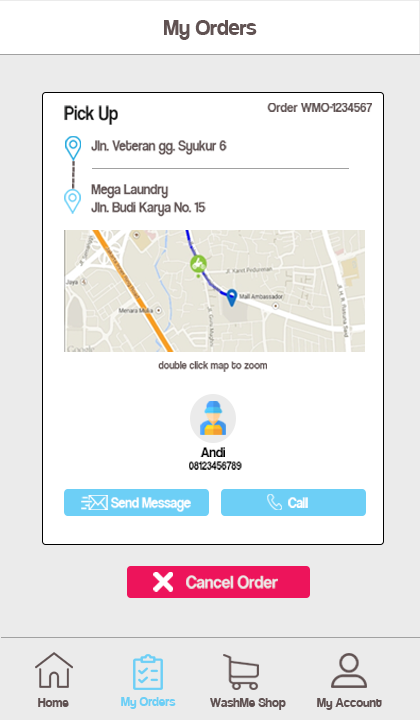
<style>
.page{position:relative;width:420px;height:720px;background:#ffffff}
.page>*{position:absolute;margin:0}
.t1{font:24px "Coolvetica-Regular";color:#605252}
.t2{font:20.3px "CoolveticaRg-Regular";color:#121313;scale:0.88 1}
.t3{font:13.5px "CoolveticaRg-Regular";color:#605252;scale:0.96 1}
.t4{font:15.2px "CoolveticaRg-Regular";color:#605252;scale:0.88 1}
.t5{font:17.8px "CoolveticaRg-Regular";color:#605252;scale:1.14 1}
.t6{font:11.8px "CoolveticaRg-Regular";color:#605252;scale:0.88 1}
.t7{font:15.2px "CoolveticaRg-Regular";color:#000000;scale:0.88 1}
.t8{font:11.8px "CoolveticaRg-Regular";color:#040404;scale:0.88 1}
.t9{font:15.2px "CoolveticaRg-Regular";color:#ffffff;scale:0.88 1}
.t10{font:18px "CoolveticaRg-Regular";color:#ebebeb;scale:0.96 1}
.t11{font:14px "Coolvetica-Regular";color:#605252}
.t12{font:14px "Coolvetica-Regular";color:#6dcff6}
</style>
<div class="page">
<p class="t1" style="left:164px;top:20px;width:93px;height:20px">My Orders</p>
<p class="t2" style="left:64px;top:105px;width:54px;height:20px">Pick Up</p>
<p class="t3" style="left:267px;top:103px;width:105px;height:9px">Order WMO-1234567</p>
<p class="t4" style="left:91px;top:140px;width:136px;height:15px">Jln. Veteran gg. Syukur 6</p>
<p class="t5" style="left:72px;top:161px;width:3px;height:28px;rotate:91deg">-----</p>
<p class="t4" style="left:91px;top:184px;width:115px;height:33px">Mega Laundry<br>Jln. Budi Karya No. 15</p>
<p class="t6" style="left:158px;top:361px;width:109px;height:11px">double click map to zoom</p>
<p class="t7" style="left:200px;top:447px;width:25px;height:10px">Andi</p>
<p class="t8" style="left:189px;top:461px;width:53px;height:9px">08123456789</p>
<p class="t9" style="left:111px;top:497px;width:80px;height:15px">Send Message</p>
<p class="t9" style="left:288px;top:497px;width:20px;height:11px">Call</p>
<p class="t10" style="left:186px;top:575px;width:92px;height:14px">Cancel Order</p>
<p class="t11" style="left:38px;top:698px;width:31px;height:9px">Home</p>
<p class="t12" style="left:121px;top:697px;width:55px;height:12px">My Orders</p>
<p class="t11" style="left:210px;top:698px;width:76px;height:12px">WashMe Shop</p>
<p class="t11" style="left:317px;top:698px;width:65px;height:12px">My Account</p>
</div>
